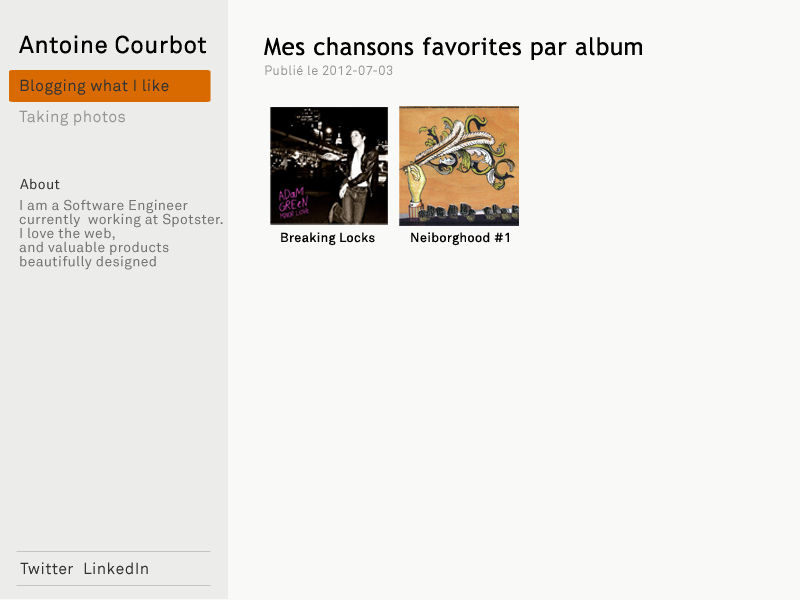
<style>
.page{position:relative;width:800px;height:600px;background:#f9f9f8}
.page>*{position:absolute;margin:0}
.t1{font:24px "Akkurat";letter-spacing:0.025em;color:#000000}
.t2{font:24px "TrebuchetMS";letter-spacing:0.025em;color:#000000}
.t3{font:13px "Akkurat";letter-spacing:0.025em;color:#959595}
.t4{font:16px "Akkurat";letter-spacing:0.025em;color:#333333}
.t5{font:16px "Akkurat";letter-spacing:0.025em;color:#959595}
.t6{font:14px "Akkurat";letter-spacing:0.025em;color:#333333}
.t7{font:14px/14px "Akkurat";letter-spacing:0.025em;color:#747474}
.t8{font:13px "Akkurat";letter-spacing:0.025em;color:#000000}
</style>
<div class="page">
<p class="t1" style="left:19px;top:35px;width:187px;height:19px">Antoine Courbot</p>
<p class="t2" style="left:264px;top:37px;width:378px;height:23px">Mes chansons favorites par album</p>
<p class="t3" style="left:265px;top:65px;width:128px;height:10px">Publié le 2012-07-03</p>
<p class="t4" style="left:20px;top:79px;width:149px;height:16px">Blogging what I like</p>
<p class="t5" style="left:19px;top:110px;width:106px;height:16px">Taking photos</p>
<p class="t6" style="left:20px;top:178px;width:40px;height:12px">About</p>
<p class="t7" style="left:19px;top:199px;width:204px;height:71px">I am a Software Engineer <br>currently  working at Spotster. <br>I love the web, <br>and valuable products<br>beautifully designed</p>
<p class="t8" style="left:281px;top:232px;width:94px;height:14px">Breaking Locks</p>
<p class="t8" style="left:411px;top:232px;width:98px;height:14px">Neiborghood #1</p>
<p class="t4" style="left:20px;top:562px;width:53px;height:13px">Twitter</p>
<p class="t4" style="left:84px;top:562px;width:64px;height:13px">LinkedIn</p>
</div>
